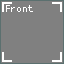
<style>
.page{position:relative;width:64px;height:64px;background:#808080}
.page>*{position:absolute;margin:0}
.t1{font:10px "SourceCodePro-Regular";color:#ffffff}
</style>
<div class="page">
<p class="t1" style="left:6px;top:5px;width:27px;height:7px">Front</p>
</div>
